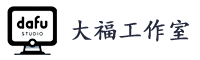
<style>
.page{position:relative;width:200px;height:60px;background:#ffffff}
.page>*{position:absolute;margin:0}
.t1{font:24px "KaiTi";color:#24283c;font-weight:bold}
</style>
<div class="page">
<p class="t1" style="left:72px;top:19px;width:117px;height:23px">大福工作室</p>
</div>
